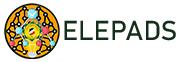
<style>
.page{position:relative;width:180px;height:62px;background:#ffffff}
.page>*{position:absolute;margin:0}
.t1{font:27px "Bahnschrift";color:#142e19}
</style>
<div class="page">
<p class="t1" style="left:64px;top:20px;width:112px;height:21px">ELEPADS</p>
</div>
